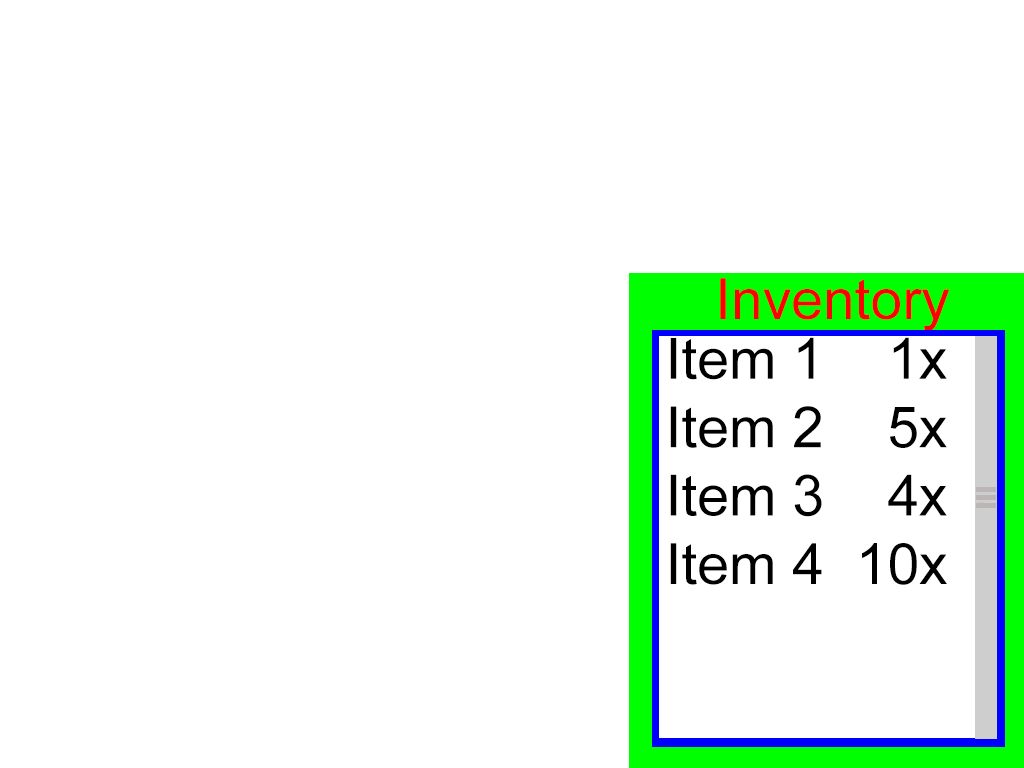
<style>
.page{position:relative;width:1024px;height:768px;background:#ffffff}
.page>*{position:absolute;margin:0}
.t1{font:57px "ArialMT";color:#ff0000}
.t2{font:57px "ArialMT";color:#000000}
</style>
<div class="page">
<p class="t1" style="left:720px;top:278px;width:230px;height:53px">Inventory</p>
<p class="t2" style="left:670px;top:337px;width:277px;height:248px">Item 1    1x<br>Item 2    5x<br>Item 3    4x<br>Item 4  10x</p>
</div>
